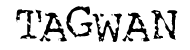
<style>
.page{position:relative;width:190px;height:50px;background:#ffffff}
.page>*{position:absolute;margin:0}
.t1{font:50px "GenXCrumble";color:#000000}
</style>
<div class="page">
<p class="t1" style="left:15px;top:6px;width:163px;height:36px">TAGWAN</p>
</div>
